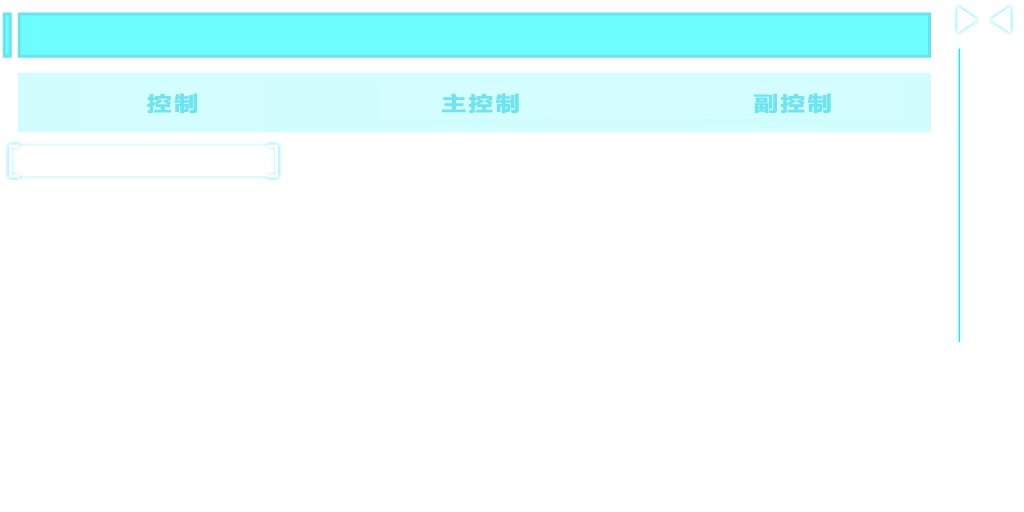
<style>
.page{position:relative;width:1024px;height:512px;background:#ffffff}
.page>*{position:absolute;margin:0}
.t1{font:20px "MicrosoftYaHei-Bold";letter-spacing:0.1em;color:#6ce4f1;font-weight:bold;scale:1.2 1}
</style>
<div class="page">
<p class="t1" style="left:147px;top:93px;width:51px;height:21px">控制</p>
<p class="t1" style="left:442px;top:93px;width:77px;height:21px">主控制</p>
<p class="t1" style="left:754px;top:93px;width:77px;height:21px">副控制</p>
</div>
